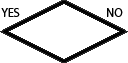
<style>
.page{position:relative;width:128px;height:63px;background:#ffffff}
.page>*{position:absolute;margin:0}
.t1{font:12px "MyriadPro-Regular";color:#030303}
.t2{font:12px "MyriadPro-Regular";color:#010101}
</style>
<div class="page">
<p class="t1" style="left:1px;top:8px;width:19px;height:9px">YES</p>
<p class="t2" style="left:107px;top:8px;width:16px;height:9px">NO</p>
</div>
